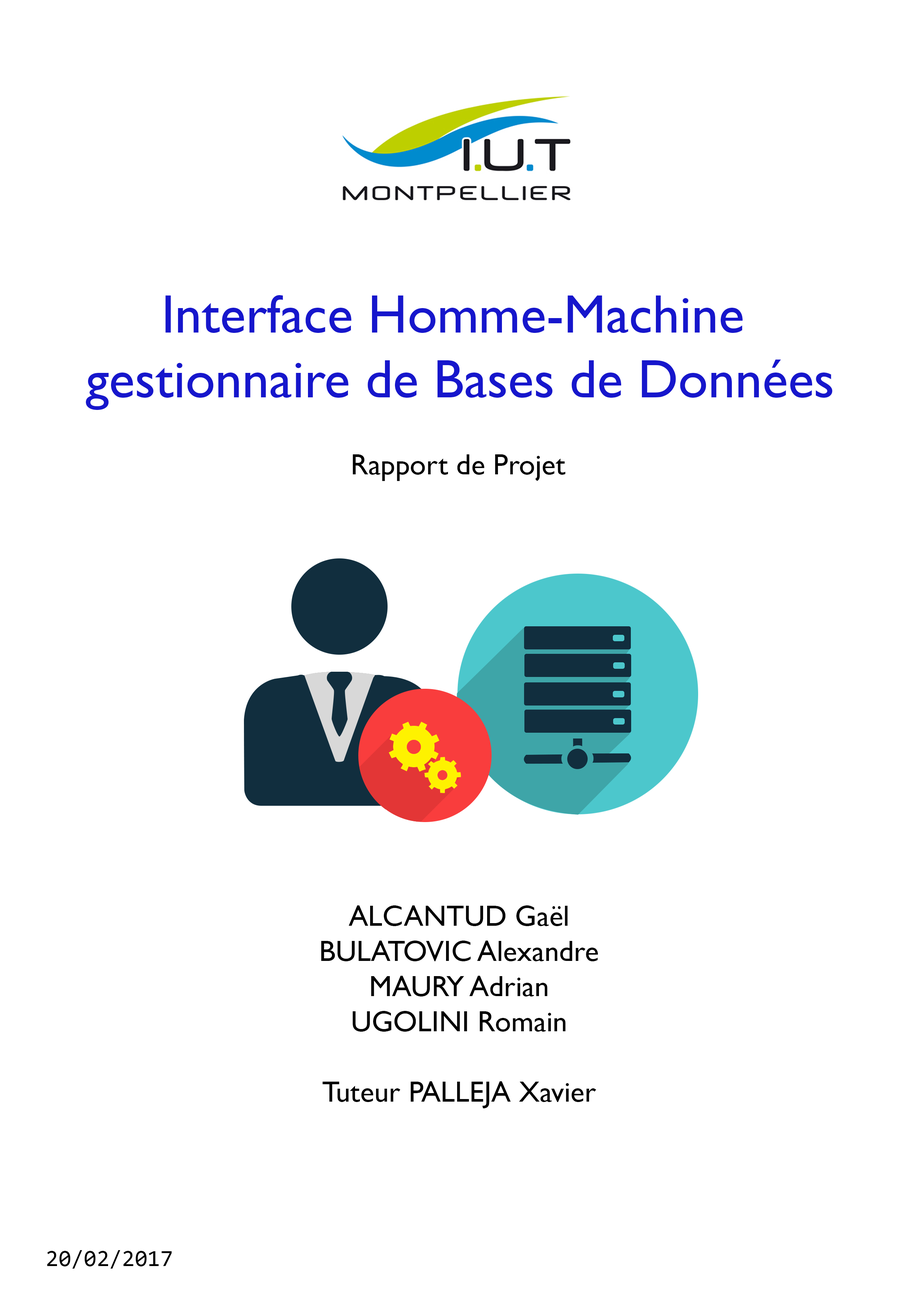
<style>
.page{position:relative;width:918px;height:1299px;background:#ffffff}
.page>*{position:absolute;margin:0}
.t1{font:54px "GillSansMT";color:#1616cc}
.t2{font:29.3px "GillSansMT";color:#000000}
.t3{font:23.1px "Consolas";color:#000000}
</style>
<div class="page">
<p class="t1" style="left:86px;top:295px;width:747px;height:115px;text-align:center">Interface Homme-Machine <br>gestionnaire de Bases de Données</p>
<p class="t2" style="left:353px;top:454px;width:213px;height:27px">Rapport de Projet</p>
<p class="t2" style="left:321px;top:905px;width:277px;height:203px;text-align:center">ALCANTUD Gaël<br>BULATOVIC Alexandre<br>MAURY Adrian<br>UGOLINI Romain<br><br>Tuteur PALLEJA Xavier</p>
<p class="t3" style="left:47px;top:1250px;width:125px;height:18px">20/02/2017</p>
</div>
